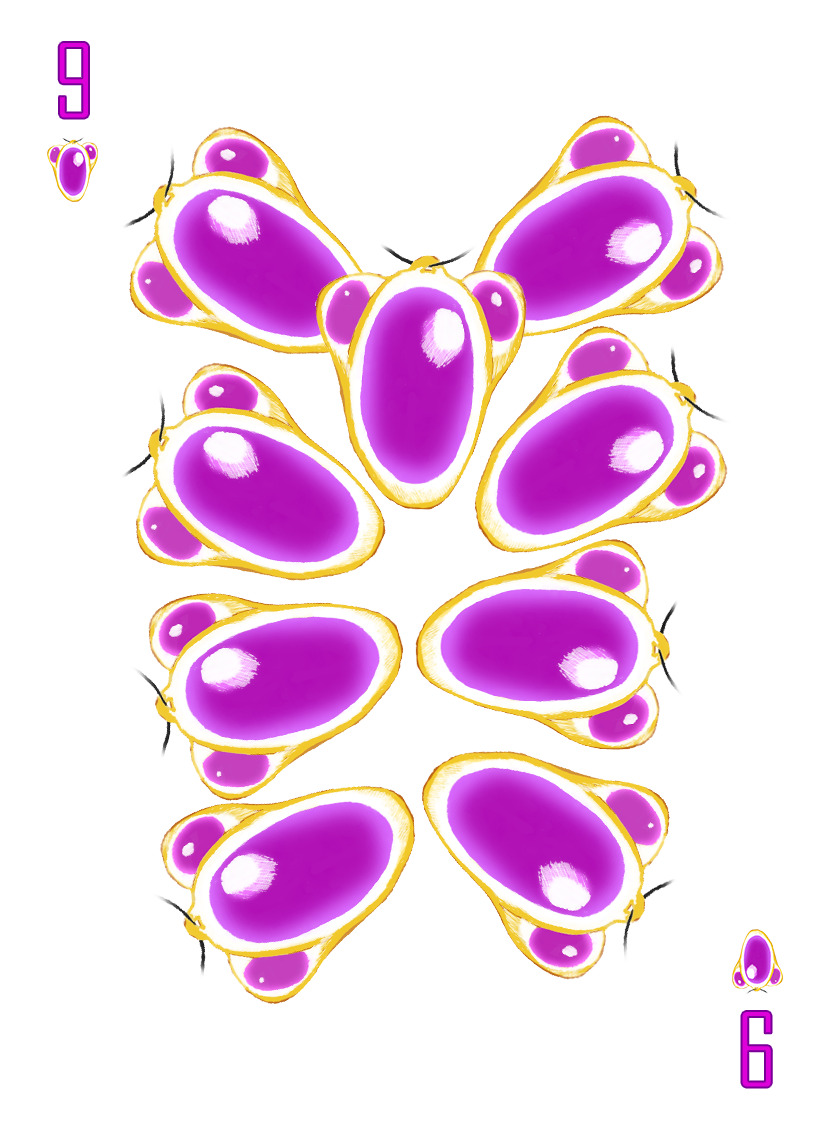
<style>
.page{position:relative;width:825px;height:1125px;background:#ffffff}
.page>*{position:absolute;margin:0}
.t1{font:100px "AgencyFB-Reg";color:#de00d8}
</style>
<div class="page">
<p class="t1" style="left:58px;top:42px;width:31px;height:77px">9</p>
<p class="t1" style="left:741px;top:1011px;width:31px;height:77px;rotate:180deg">9</p>
</div>
